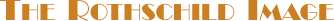
<style>
.page{position:relative;width:334px;height:21px;background:#ffffff}
.page>*{position:absolute;margin:0}
.t1{font:24px "Broadway";color:#cb7f22}
.t2{font:30px "Broadway";color:#cb7f22}
</style>
<div class="page">
<p class="t1" style="left:0px;top:0px;width:334px;height:21px"><span class="t2">T</span>HE  <span class="t2">R</span>OTHSCHILD  <span class="t2">I</span>MAGE</p>
</div>
